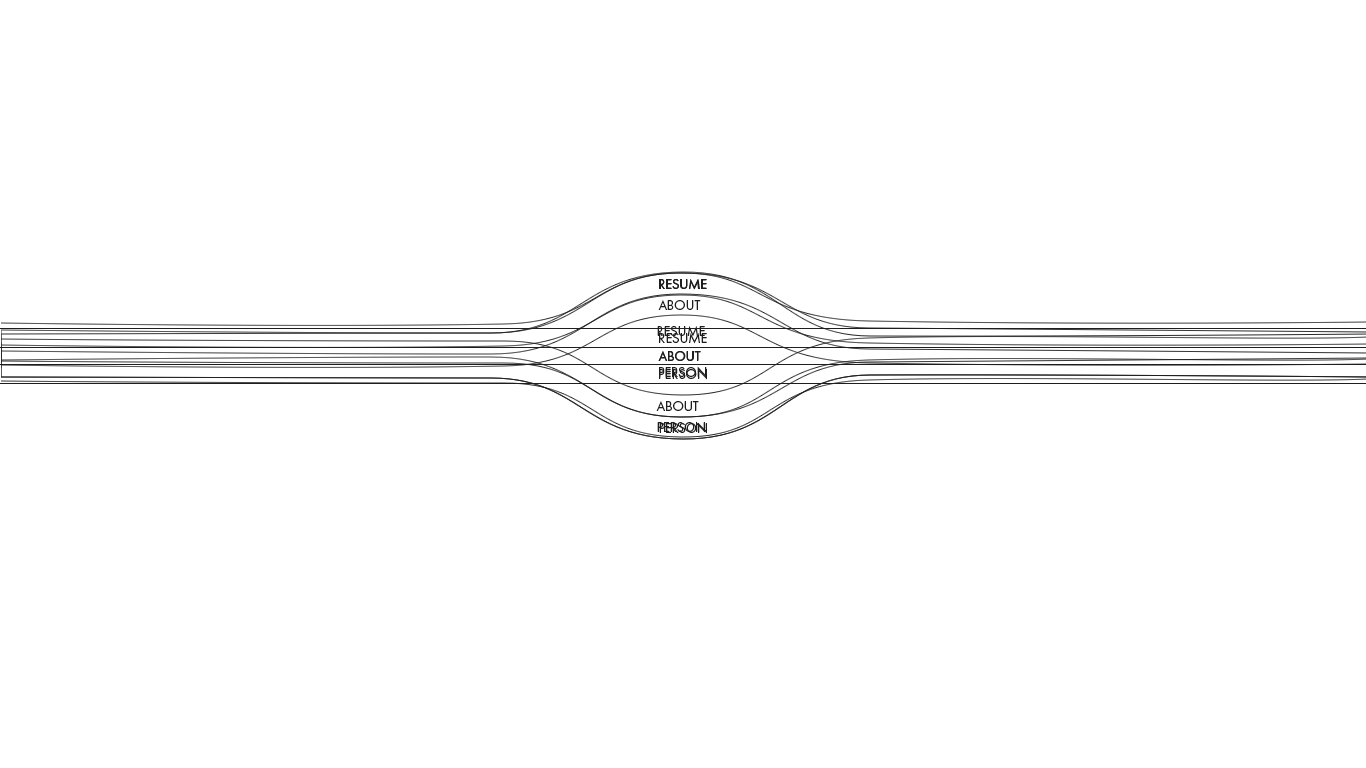
<style>
.page{position:relative;width:1366px;height:768px;background:#ffffff}
.page>*{position:absolute;margin:0}
.t1{font:14px/18px "LuganskyV";color:#1e1e1e}
.t2{font:14px/21px "LuganskyV";color:#1e1e1e}
.t3{font:14px "LuganskyV";color:#1e1e1e}
</style>
<div class="page">
<p class="t1" style="left:658px;top:279px;width:49px;height:155px">RESUME<br><br><br><br>ABOUT<br><br><br><br>PERSON</p>
<p class="t1" style="left:658px;top:279px;width:49px;height:99px">RESUME<br><span class="t2">ABOUT<br></span><span class="t3"><br><br><br>PERSON</span></p>
<p class="t2" style="left:656px;top:326px;width:49px;height:107px"><span class="t1"><br><br>RESUME<br><br><br><br></span>ABOUT<br>PERSON</p>
<p class="t1" style="left:658px;top:333px;width:49px;height:47px">RESUME<br>ABOUT<br>PERSON</p>
</div>
